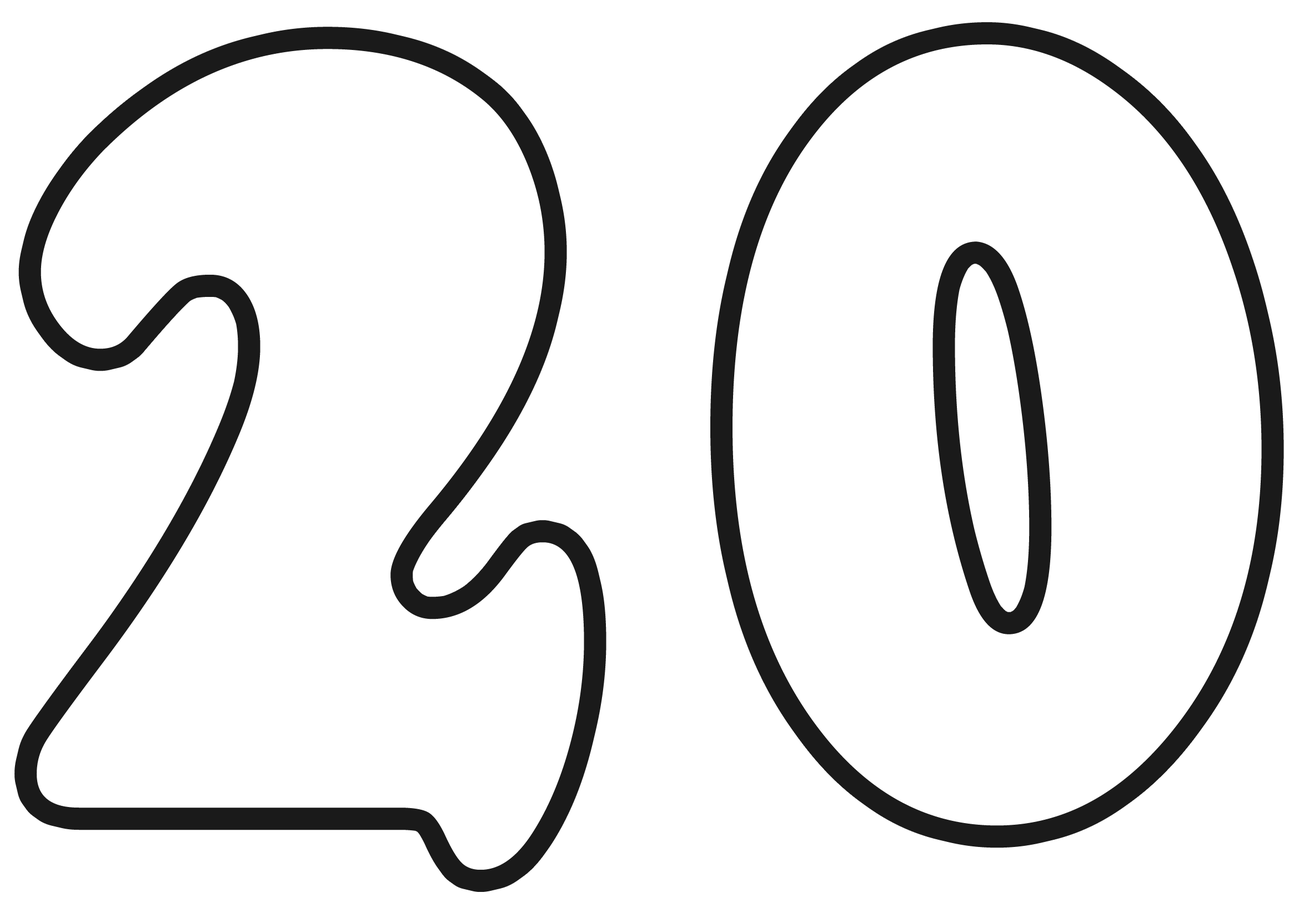
<style>
.page{position:relative;width:1299px;height:918px;background:#ffffff}
.page>*{position:absolute;margin:0}
.t1{font:1354.6px "CooperBlack";letter-spacing:0.107em;color:#ffffff;scale:0.71 1}
</style>
<div class="page">
<p class="t1" style="left:37px;top:44px;width:1224px;height:826px">20</p>
</div>
